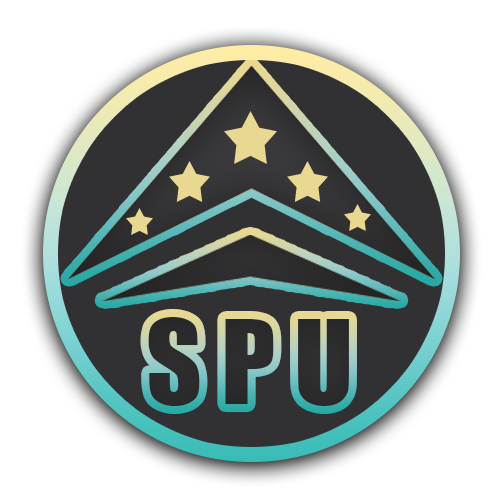
<style>
.page{position:relative;width:500px;height:500px;background:#ffffff}
.page>*{position:absolute;margin:0}
.t1{font:107.9px "Impact";color:#3a3a3c}
</style>
<div class="page">
<p class="t1" style="left:148px;top:317px;width:201px;height:89px">S P U</p>
</div>
